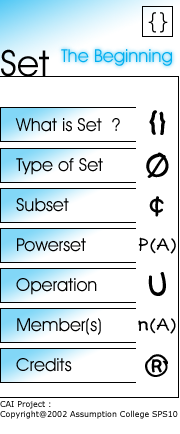
<style>
.page{position:relative;width:180px;height:434px;background:#ffffff}
.page>*{position:absolute;margin:0}
.t1{font:36px "AvantGardeITCbyBT-Book";color:#000000}
.t2{font:18px "AvantGardeITCbyBT-Book";color:#00aeef}
.t3{font:30px "KidsPlain";color:#000000}
.t4{font:18px/40px "AvantGardeITCbyBT-Book";color:#000000}
.t5{font:18px "KidsPlain";color:#000000}
.t6{font:8px "Verdana";color:#000000}
</style>
<div class="page">
<p class="t1" style="left:1px;top:49px;width:48px;height:28px">Set</p>
<p class="t2" style="left:61px;top:49px;width:111px;height:17px">The Beginning</p>
<p class="t3" style="left:149px;top:110px;width:17px;height:25px">{}</p>
<p class="t4" style="left:15px;top:118px;width:105px;height:254px">What is Set  ?<br>Type of Set<br>Subset<br>Powerset<br>Operation <br>Member(s)<br>Credits</p>
<p class="t3" style="left:146px;top:152px;width:23px;height:26px">Ø</p>
<p class="t3" style="left:149px;top:196px;width:15px;height:21px">¢</p>
<p class="t5" style="left:138px;top:237px;width:38px;height:17px">P(A)</p>
<p class="t3" style="left:148px;top:272px;width:18px;height:24px">U</p>
<p class="t5" style="left:138px;top:318px;width:38px;height:16px">n(A)</p>
<p class="t3" style="left:145px;top:354px;width:23px;height:23px">®</p>
<p class="t6" style="left:0px;top:401px;width:178px;height:18px">CAI Project : <br>Copyright@2002 Assumption College SPS10</p>
</div>
